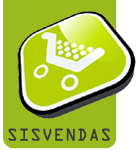
<style>
.page{position:relative;width:140px;height:150px;background:#9bba1e}
.page>*{position:absolute;margin:0}
.t1{font:18.4px "OCRAExtended";letter-spacing:0.031em;color:#393a41}
</style>
<div class="page">
<p class="t1" style="left:8px;top:128px;width:102px;height:13px">SISVENDAS</p>
</div>
